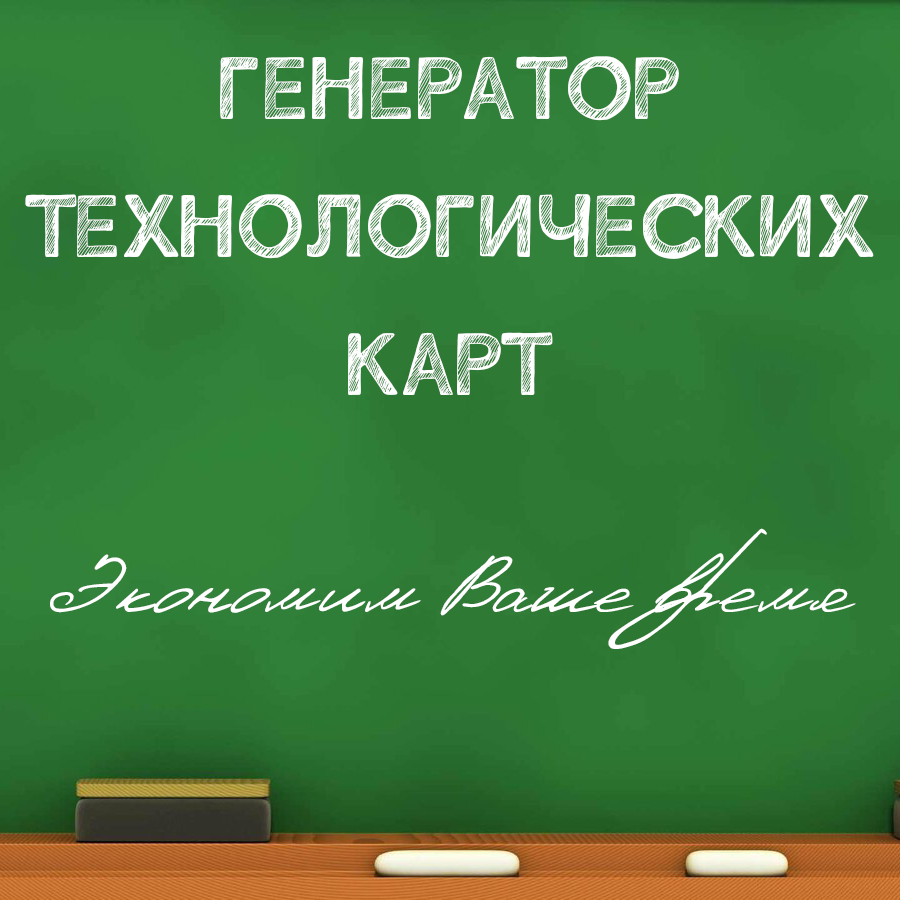
<style>
.page{position:relative;width:900px;height:900px}
.page>*{position:absolute;margin:0}
.t1{font:115.2px "Chalkcyrillicfreehand";color:#ffffff}
.t2{font:94.7px "Denistina";color:#ffffff}
</style>
<div class="page">
<p class="t1" style="left:25px;top:56px;width:849px;height:339px;text-align:center">ГЕНЕРАТОР<br>ТЕХНОЛОГИЧЕСКИХ<br>КАРТ</p>
<p class="t2" style="left:50px;top:528px;width:806px;height:121px">Экономим Ваше время</p>
</div>
